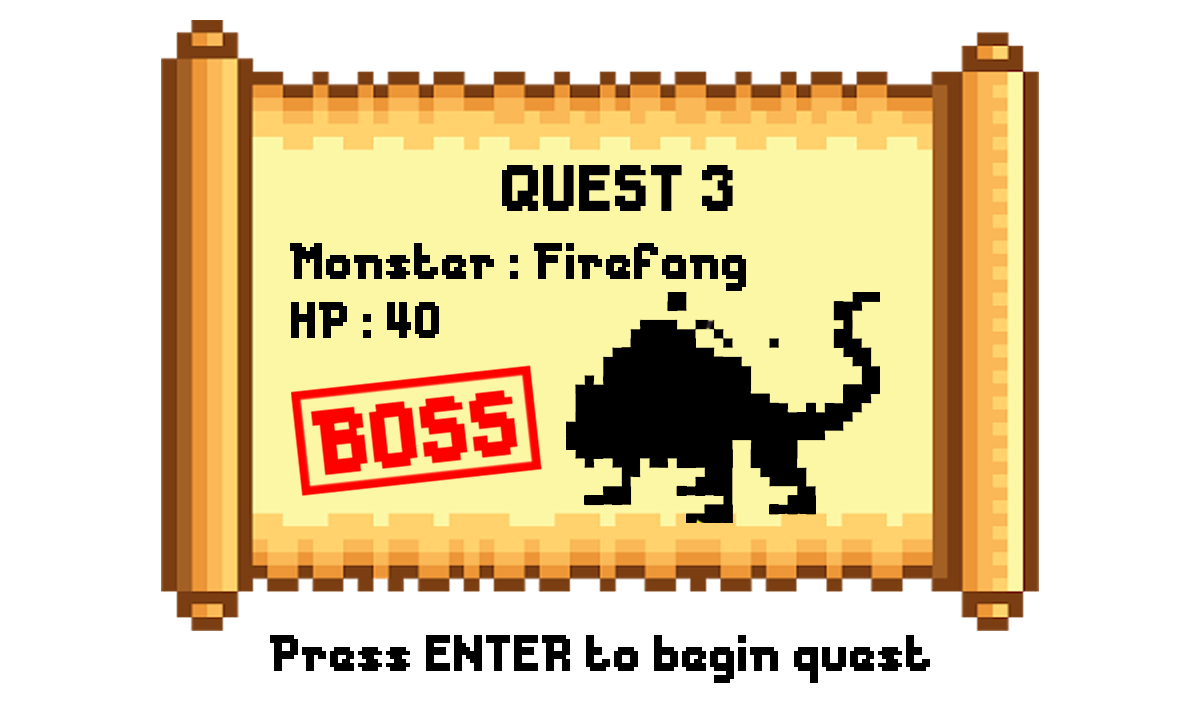
<style>
.page{position:relative;width:1200px;height:720px;background:#ffffff}
.page>*{position:absolute;margin:0}
.t1{font:61.3px "Messe-Duesseldorf";color:#000000}
.t2{font:48px "Messe-Duesseldorf";color:#000000}
</style>
<div class="page">
<p class="t1" style="left:502px;top:165px;width:231px;height:46px">QUEST 3</p>
<p class="t2" style="left:290px;top:243px;width:456px;height:48px">Monster : Firefang</p>
<p class="t2" style="left:291px;top:302px;width:148px;height:36px">HP : 40</p>
<p class="t2" style="left:270px;top:635px;width:660px;height:48px">Press ENTER to begin quest</p>
</div>
